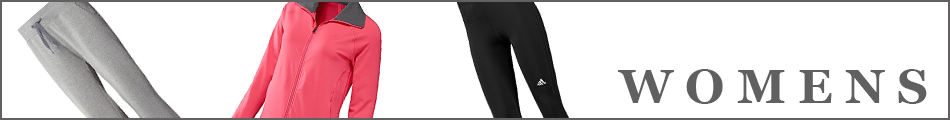
<style>
.page{position:relative;width:950px;height:120px;background:#ffffff}
.page>*{position:absolute;margin:0}
.t1{font:48px "Georgia-Bold";color:#616060}
</style>
<div class="page">
<p class="t1" style="left:618px;top:69px;width:309px;height:35px">W O M E N S</p>
</div>
